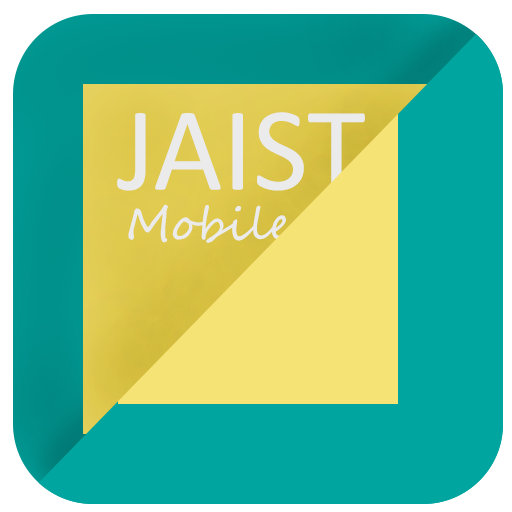
<style>
.page{position:relative;width:512px;height:512px;background:#01a59f}
.page>*{position:absolute;margin:0}
.t1{font:120px "Calibri";color:#ebebeb}
.t2{font:45px "SegoeScript";color:#ebebeb}
</style>
<div class="page">
<p class="t1" style="left:117px;top:112px;width:248px;height:79px">JAIST</p>
<p class="t2" style="left:128px;top:204px;width:172px;height:39px">Mobile</p>
</div>
